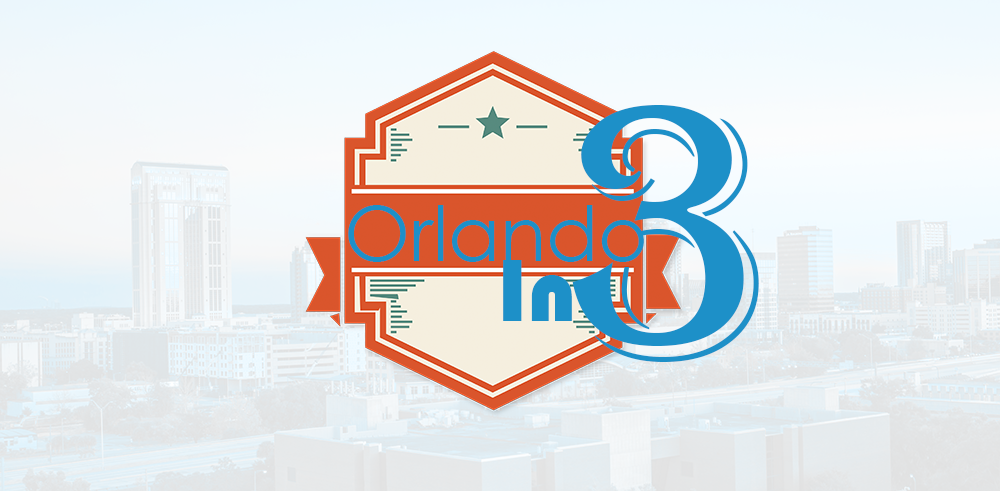
<style>
.page{position:relative;width:1000px;height:491px}
.page>*{position:absolute;margin:0}
.t1{font:372px "Algerian";color:#1d90c8}
.t2{font:76px "CenturyGothic";color:#1d90c8}
.t3{font:92px "Bauhaus93";color:#1d90c8}
</style>
<div class="page">
<p class="t1" style="left:572px;top:105px;width:187px;height:257px">3</p>
<p class="t2" style="left:348px;top:205px;width:296px;height:57px">Orlando</p>
<p class="t3" style="left:503px;top:260px;width:69px;height:61px">In</p>
</div>
